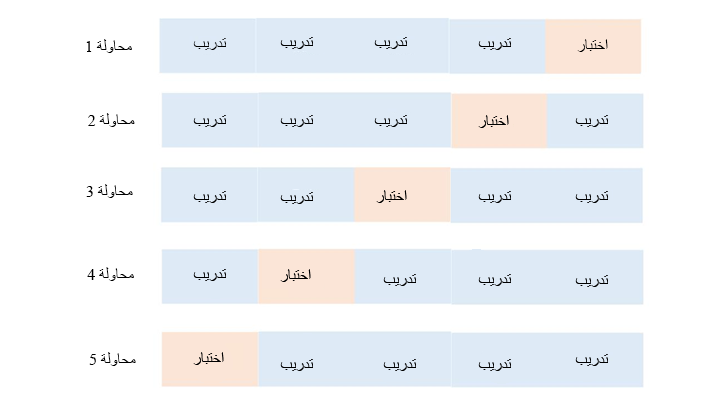
<style>
.page{position:relative;width:721px;height:406px;background:#ffffff}
.page>*{position:absolute;margin:0}
.t1{font:12px "TimesNewRomanPSMT";color:#000000}
</style>
<div class="page">
<p class="t1" style="left:86px;top:39px;width:46px;height:14px">محاولة 1</p>
<p class="t1" style="left:193px;top:38px;width:33px;height:12px">تدريب</p>
<p class="t1" style="left:577px;top:39px;width:31px;height:13px">اختبار</p>
<p class="t1" style="left:88px;top:113px;width:47px;height:14px">محاولة 2</p>
<p class="t1" style="left:86px;top:184px;width:47px;height:14px">محاولة 3</p>
<p class="t1" style="left:87px;top:267px;width:47px;height:14px">محاولة 4</p>
<p class="t1" style="left:89px;top:352px;width:47px;height:14px">محاولة 5</p>
</div>
